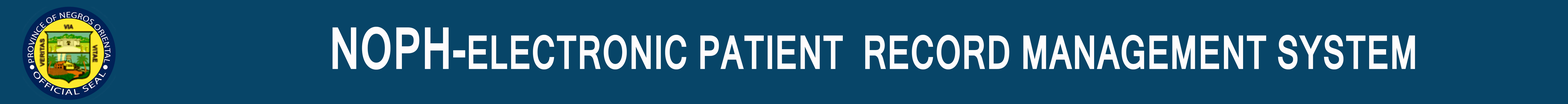
<style>
.page{position:relative;width:1568px;height:104px;background:#074568}
.page>*{position:absolute;margin:0}
.t1{font:45.3px "Kartika-Bold";color:#fefcfc;scale:0.71 1}
.t2{font:56.2px "Kartika-Bold";color:#fefcfc;scale:0.71 1}
</style>
<div class="page">
<p class="t1" style="left:333px;top:27px;width:1082px;height:43px"><span class="t2">NOPH-</span>ELECTRONIC PATIENT  RECORD MANAGEMENT SYSTEM</p>
</div>
